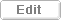
<style>
.page{position:relative;width:61px;height:20px;background:#ffffff}
.page>*{position:absolute;margin:0}
.t1{font:12px "Dotum";letter-spacing:0.01em;color:#7f7f7f;font-weight:bold}
</style>
<div class="page">
<p class="t1" style="left:17px;top:5px;width:24px;height:9px">Edit</p>
</div>
